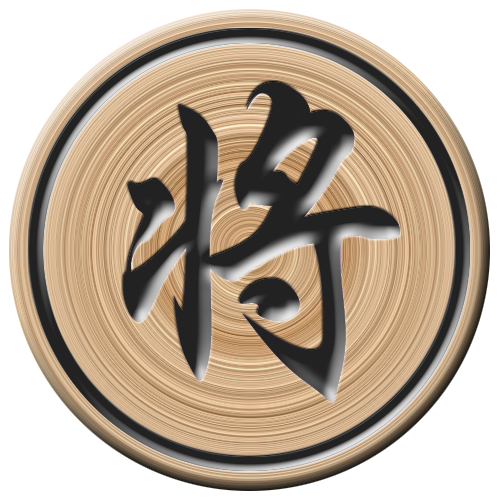
<style>
.page{position:relative;width:500px;height:500px;background:#ffffff}
.page>*{position:absolute;margin:0}
.t1{font:360px "STXingkai"}
</style>
<div class="page">
<p class="t1" style="left:123px;top:82px;width:277px;height:320px">将</p>
</div>
